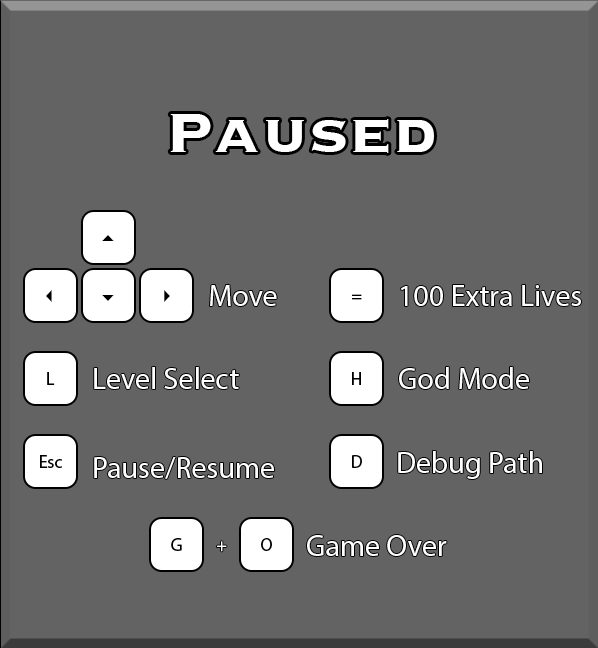
<style>
.page{position:relative;width:598px;height:648px;background:#636363}
.page>*{position:absolute;margin:0}
.t1{font:72px "Copperplate-Bold";color:#ffffff}
.t2{font:30px "MyriadPro-Regular";color:#ffffff}
.t3{font:18px "MyriadPro-Regular";color:#000000}
.t4{font:18px "MyriadPro-Regular";color:#ffffff}
</style>
<div class="page">
<p class="t1" style="left:170px;top:114px;width:264px;height:39px">Paused</p>
<p class="t2" style="left:210px;top:285px;width:67px;height:21px">Move</p>
<p class="t3" style="left:352px;top:294px;width:10px;height:6px">=</p>
<p class="t2" style="left:401px;top:285px;width:180px;height:21px">100 Extra Lives</p>
<p class="t3" style="left:47px;top:372px;width:8px;height:13px">L</p>
<p class="t2" style="left:94px;top:367px;width:145px;height:22px">Level Select</p>
<p class="t3" style="left:352px;top:372px;width:9px;height:13px">H</p>
<p class="t2" style="left:399px;top:367px;width:130px;height:22px">God Mode</p>
<p class="t3" style="left:40px;top:455px;width:22px;height:13px">Esc</p>
<p class="t2" style="left:94px;top:457px;width:180px;height:22px">Pause/Resume</p>
<p class="t3" style="left:352px;top:455px;width:10px;height:13px">D</p>
<p class="t2" style="left:398px;top:451px;width:144px;height:28px">Debug Path</p>
<p class="t3" style="left:171px;top:538px;width:11px;height:13px">G</p>
<p class="t4" style="left:217px;top:541px;width:10px;height:11px">+</p>
<p class="t3" style="left:261px;top:538px;width:11px;height:13px">O</p>
<p class="t2" style="left:307px;top:535px;width:140px;height:21px">Game Over</p>
</div>
